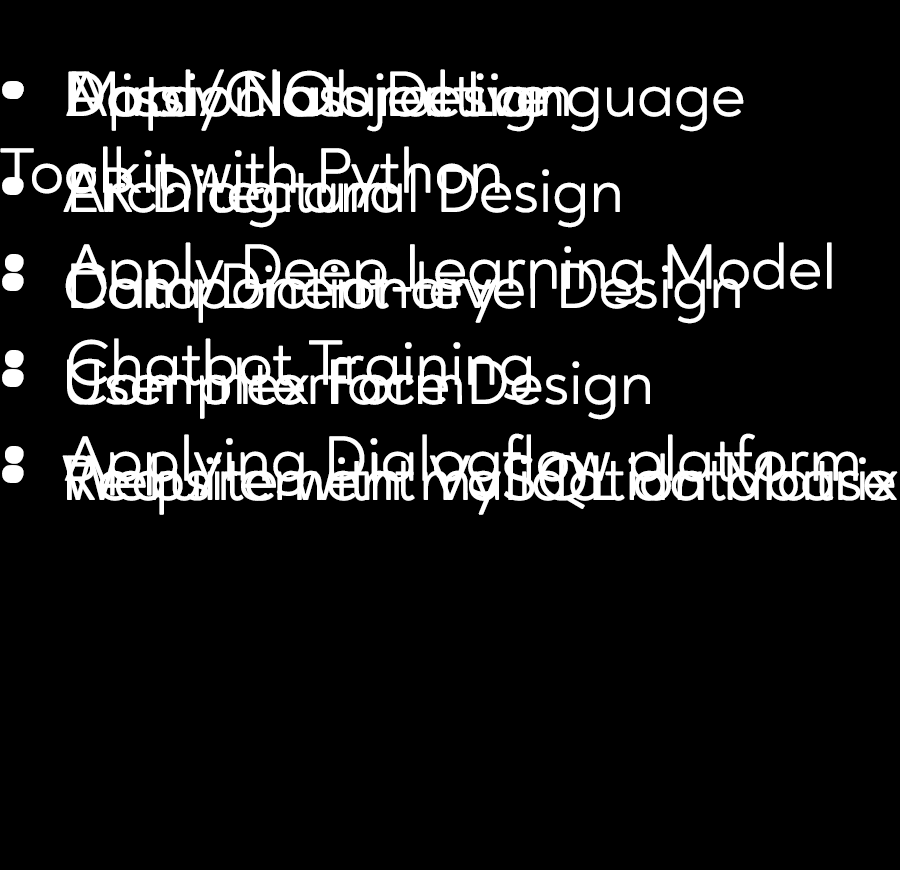
<style>
.page{position:relative;width:900px;height:870px;background:#000000}
.page>*{position:absolute;margin:0}
.t1{font:64px "AgeoPersonalUse-Regular";color:#ffffff}
.t2{font:80px "Itim-Regular";color:#ffffff}
</style>
<div class="page">
<p class="t1" style="left:0px;top:69px;width:858px;height:427px"><span class="t2">•     </span>Apply Natural Language <br>Toolkit with Python<br><span class="t2">•     </span>Apply Deep Learning Model<br><span class="t2">•     </span>Chatbot Training<br><span class="t2">•  </span>Applying Dialogflow platform</p>
<p class="t1" style="left:2px;top:69px;width:896px;height:446px"><span class="t2">•     </span>Data/Class Design<br><span class="t2">•     </span>Architectural Design<br><span class="t2">•     </span>Component-level Design<br><span class="t2">•  </span>User Interface Design<br><span class="t2">•  </span>Requirement Validation Matrix</p>
<p class="t1" style="left:5px;top:69px;width:890px;height:446px"><span class="t2">•     </span>Mission Objective<br><span class="t2">•     </span>ER Diagram<br><span class="t2">•     </span>Data Dictionary<br><span class="t2">•  </span>Complex Form<br><span class="t2">• </span> Website with mySQL database</p>
</div>
